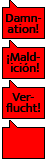
<style>
.page{position:relative;width:48px;height:160px;background:#ff0000}
.page>*{position:absolute;margin:0}
.t1{font:13px/11px "MuktaVaani-Regular";color:#000000}
</style>
<div class="page">
<p class="t1" style="left:6px;top:14px;width:36px;height:98px;text-align:center">Damn-<br>ation!<br><br>¡Mald-<br> ición!<br><br>Ver-<br>flucht!</p>
</div>
